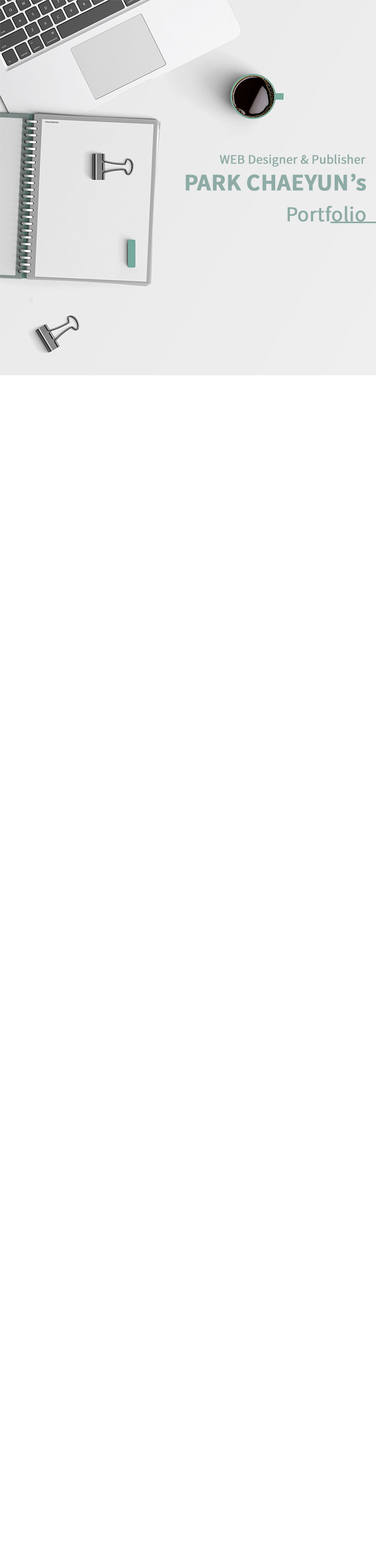
<style>
.page{position:relative;width:376px;height:1568px;background:#ffffff}
.page>*{position:absolute;margin:0}
.t1{font:11.5px "NotoSansKR-Regular";color:#8eaba6;font-weight:bold}
.t2{font:20.9px "NotoSansKR-Bold";color:#8eaba6;font-weight:bold}
.t3{font:18.8px "NotoSansKR-Regular";color:#8eaba6;font-weight:bold}
</style>
<div class="page">
<p class="t1" style="left:220px;top:154px;width:146px;height:13px">WEB Designer &amp; Publisher</p>
<p class="t2" style="left:186px;top:174px;width:180px;height:17px">PARK CHAEYUN’s</p>
<p class="t3" style="left:287px;top:205px;width:79px;height:17px">Portfolio</p>
</div>
